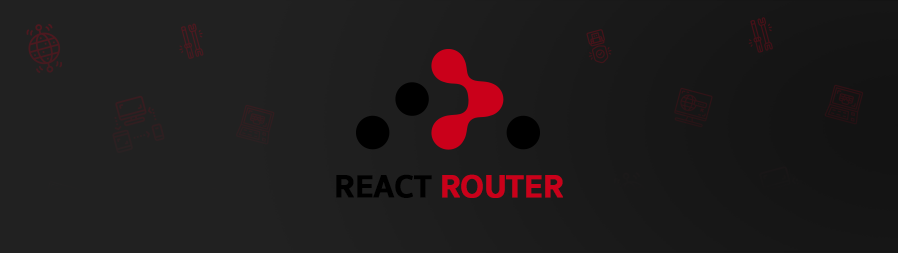
<style>
.page{position:relative;width:898px;height:253px;background:#212121}
.page>*{position:absolute;margin:0}
.t1{font:32.4px "SukhumvitSet-Bold";color:#ca001a;font-weight:bold}
.t2{font:32.4px "SukhumvitSet-Bold";color:#000000;font-weight:bold}
</style>
<div class="page">
<p class="t1" style="left:336px;top:174px;width:227px;height:24px"><span class="t2">REACT </span>ROUTER</p>
</div>
